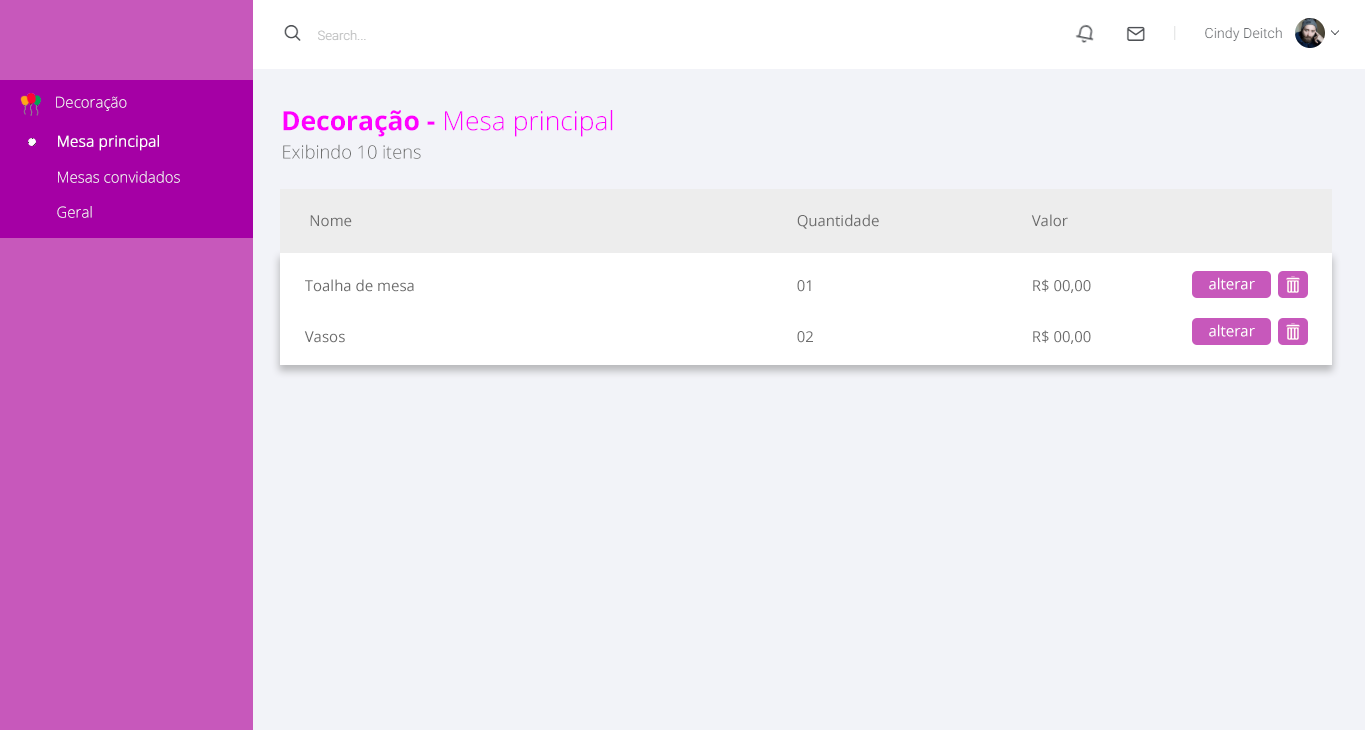
<style>
.page{position:relative;width:1365px;height:730px;background:#f2f3f8}
.page>*{position:absolute;margin:0}
.t1{font:15.1px "OpenSans-Light";color:#ffffff}
.t2{font:26.4px "OpenSans-Light";color:#ff00ff}
.t3{font:26.4px "OpenSans-Bold";color:#ff00ff}
.t4{font:15.1px "OpenSans-Light";color:#ffffff;font-weight:bold}
.t5{font:18.2px "OpenSans-Light";color:#6c6c6c}
.t6{font:15px "OpenSans";color:#6c6c6c}
.t7{font:15px "OpenSans";color:#ffffff}
</style>
<div class="page">
<p class="t1" style="left:56px;top:96px;width:71px;height:15px">Decoração</p>
<p class="t2" style="left:283px;top:110px;width:330px;height:27px"><span class="t3">Decoração - </span>Mesa principal</p>
<p class="t4" style="left:58px;top:135px;width:101px;height:16px">Mesa principal</p>
<p class="t5" style="left:283px;top:144px;width:138px;height:15px">Exibindo 10 itens</p>
<p class="t1" style="left:58px;top:171px;width:122px;height:12px">Mesas convidados</p>
<p class="t1" style="left:57px;top:206px;width:35px;height:12px">Geral</p>
<p class="t6" style="left:310px;top:215px;width:42px;height:12px">Nome</p>
<p class="t6" style="left:797px;top:214px;width:82px;height:15px">Quantidade</p>
<p class="t6" style="left:1031px;top:214px;width:37px;height:13px">Valor</p>
<p class="t6" style="left:305px;top:279px;width:109px;height:13px">Toalha de mesa</p>
<p class="t6" style="left:797px;top:280px;width:14px;height:12px">01</p>
<p class="t6" style="left:1033px;top:279px;width:58px;height:14px">R$ 00,00</p>
<p class="t7" style="left:1209px;top:277px;width:46px;height:13px">alterar</p>
<p class="t7" style="left:1209px;top:324px;width:46px;height:13px">alterar</p>
<p class="t6" style="left:304px;top:331px;width:41px;height:12px">Vasos</p>
<p class="t6" style="left:797px;top:331px;width:16px;height:12px">02</p>
<p class="t6" style="left:1033px;top:330px;width:58px;height:14px">R$ 00,00</p>
</div>
